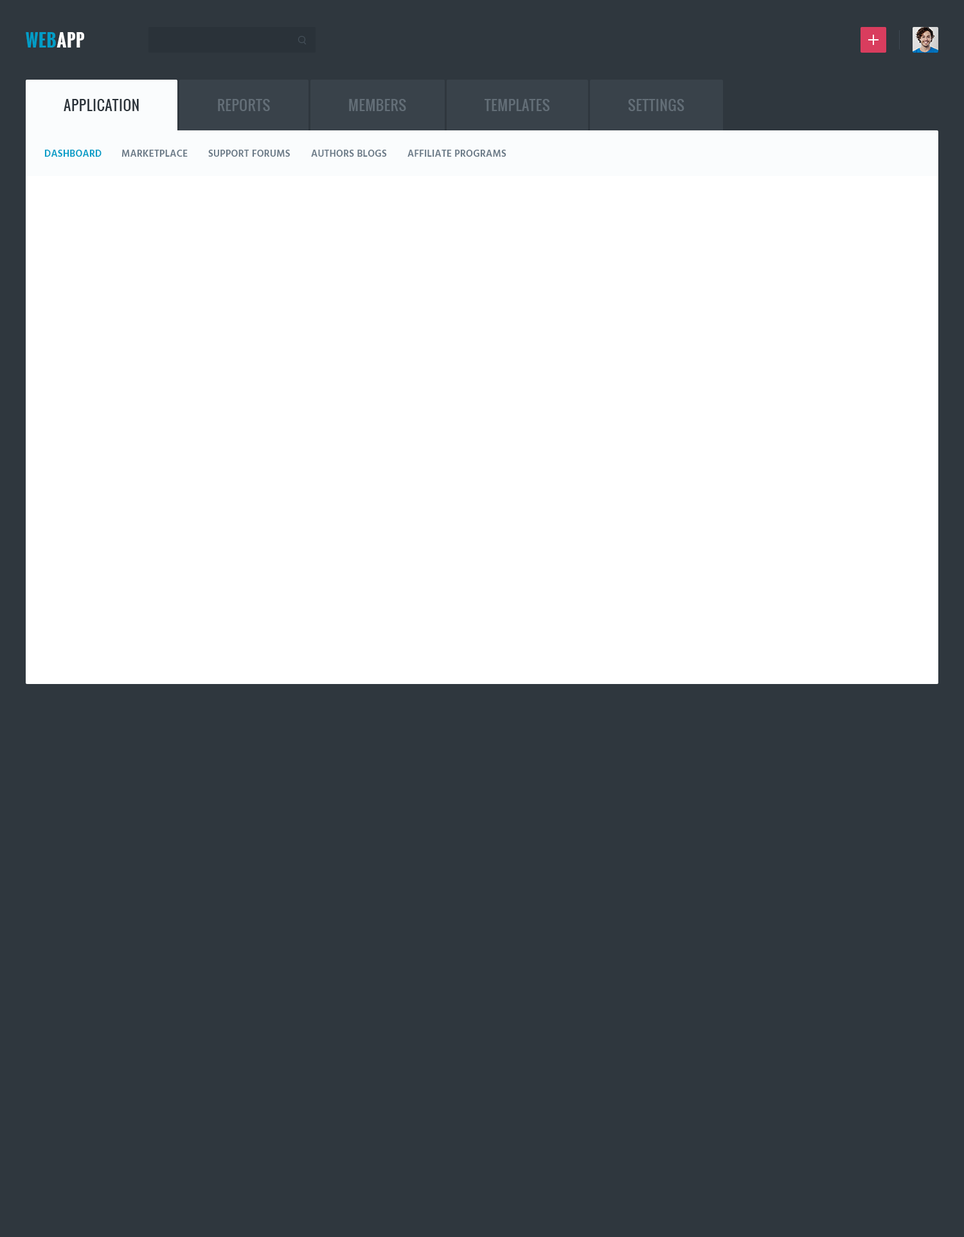
<style>
.page{position:relative;width:964px;height:1237px;background:#2f373e}
.page>*{position:absolute;margin:0}
.t1{font:17.3px "Oswald-Bold";letter-spacing:0.03em;color:#009dc7;text-transform:uppercase}
.t2{font:17.3px "Oswald-Bold";letter-spacing:0.03em;color:#ffffff;text-transform:uppercase}
.t3{font:14.1px "Oswald-Regular";letter-spacing:0.03em;color:#2a3239;text-transform:uppercase}
.t4{font:14.1px "Oswald-Regular";letter-spacing:0.03em;color:#636e77;text-transform:uppercase}
.t5{font:9.6px "Hind-Semibold";letter-spacing:0.02em;color:#009dc7;text-transform:uppercase}
.t6{font:9.6px "Hind-Semibold";letter-spacing:0.02em;color:#6c7b88;text-transform:uppercase}
</style>
<div class="page">
<p class="t1" style="left:26px;top:32px;width:59px;height:16px">Web<span class="t2">App</span></p>
<p class="t3" style="left:64px;top:99px;width:75px;height:12px">APPLICATION</p>
<p class="t4" style="left:218px;top:99px;width:52px;height:12px">REPORTS</p>
<p class="t4" style="left:349px;top:99px;width:57px;height:12px">MEMBERS</p>
<p class="t4" style="left:484px;top:99px;width:65px;height:12px">TEMPLATES</p>
<p class="t4" style="left:628px;top:99px;width:56px;height:12px">SETTINGS</p>
<p class="t5" style="left:44px;top:150px;width:58px;height:7px">DASHBOARD</p>
<p class="t6" style="left:121px;top:150px;width:67px;height:7px">MARKETPLACE</p>
<p class="t6" style="left:208px;top:150px;width:82px;height:7px">SUPPORT FORUMS</p>
<p class="t6" style="left:311px;top:150px;width:76px;height:7px">AUTHORS BLOGS</p>
<p class="t6" style="left:407px;top:150px;width:99px;height:7px">affiliate programs</p>
</div>
